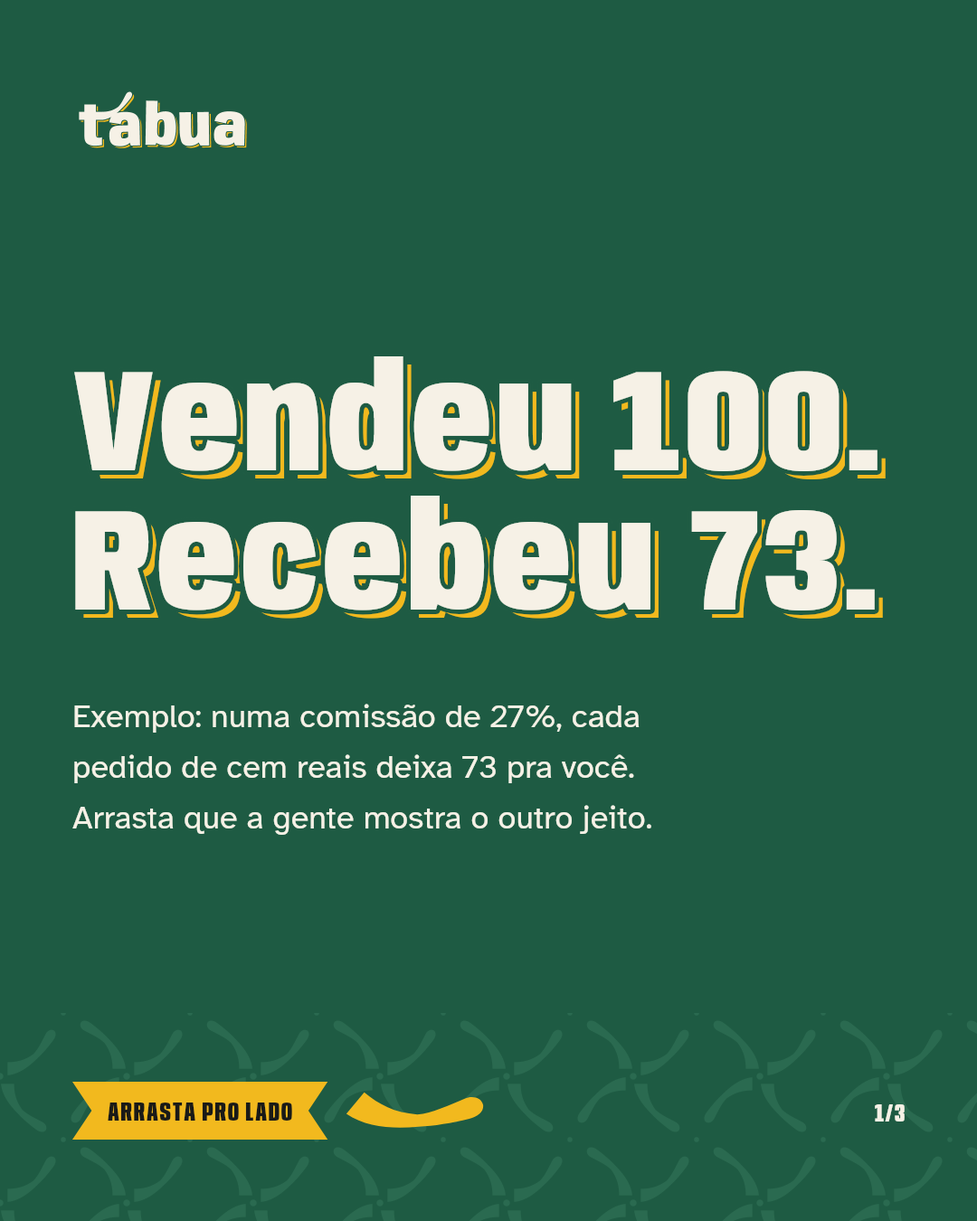
<style>
.page{position:relative;width:977px;height:1221px;background:#1e5b43}
.page>*{position:absolute;margin:0}
.t1{font:144.7px/139.3px "Anybody-Black-W75";letter-spacing:0.034em;color:#f6f1e6}
.t2{font:144.7px/139.3px "Anybody-Black-W75";letter-spacing:0.034em}
.t3{font:32.6px/50.6px "AtkinsonHyperlegible-Regular";color:#f6f1e6}
.t4{font:27.1px "Anybody-ExtraBold-W60";letter-spacing:0.06em;color:#1a1a17}
.t5{font:25.3px "Anybody-ExtraBold-W60";letter-spacing:0.06em;color:#f6f1e6}
</style>
<div class="page">
<p class="t1" style="left:70px;top:352px;width:812px;height:263px">Vendeu 100.<br>Recebeu 73.</p>
<p class="t2" style="left:82px;top:364px;width:803px;height:255px">Vendeu 100.<br>Recebeu 73.</p>
<p class="t3" style="left:72px;top:704px;width:579px;height:131px">Exemplo: numa comissão de 27%, cada<br>pedido de cem reais deixa 73 pra você.<br>Arrasta que a gente mostra o outro jeito.</p>
<p class="t4" style="left:108px;top:1102px;width:184px;height:18px">ARRASTA PRO LADO</p>
<p class="t5" style="left:875px;top:1104px;width:29px;height:17px">1/3</p>
</div>
